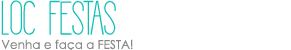
<style>
.page{position:relative;width:291px;height:50px;background:#ffffff}
.page>*{position:absolute;margin:0}
.t1{font:48px "Giraffe";color:#11c0b4}
.t2{font:12px "CenturyGothic";color:#888888}
</style>
<div class="page">
<p class="t1" style="left:1px;top:0px;width:115px;height:35px">LOC  FESTAS</p>
<p class="t2" style="left:1px;top:39px;width:132px;height:13px">Venha e faça a FESTA!</p>
</div>
